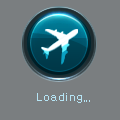
<style>
.page{position:relative;width:120px;height:120px;background:#7a7e80}
.page>*{position:absolute;margin:0}
.t1{font:11px "Dotum";letter-spacing:0.05em;color:#bbedff}
</style>
<div class="page">
<p class="t1" style="left:37px;top:93px;width:53px;height:10px">Loading...</p>
</div>
